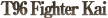
<style>
.page{position:relative;width:108px;height:18px;background:#ffffff}
.page>*{position:absolute;margin:0}
.t1{font:18px "RyuminPro-ExBold";letter-spacing:-0.11em;color:#4a3f32;font-weight:bold;scale:0.9 1}
</style>
<div class="page">
<p class="t1" style="left:0px;top:1px;width:107px;height:18px">T96 Fighter Kai</p>
</div>
